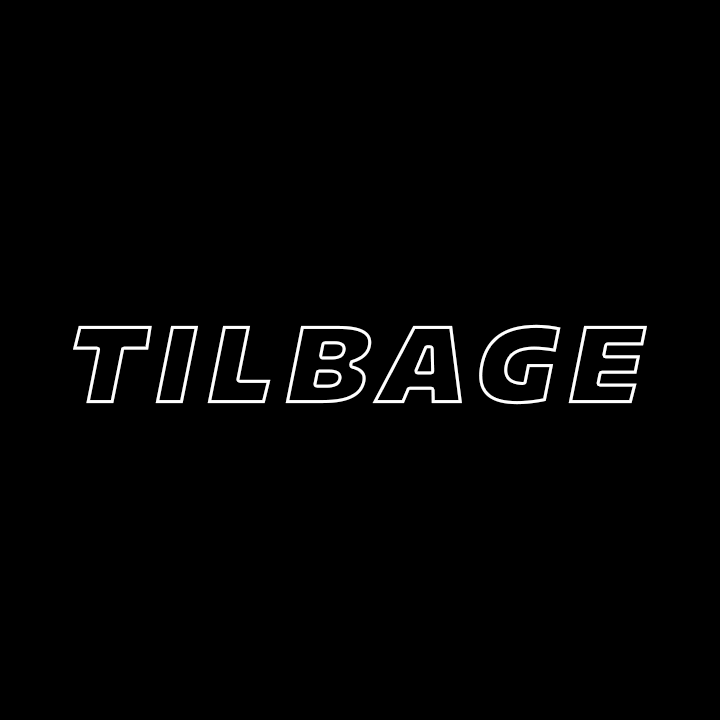
<style>
.page{position:relative;width:720px;height:720px;background:#000000}
.page>*{position:absolute;margin:0}
.t1{font:110px "Majoris-Italic";letter-spacing:0.1em;color:#000000;text-transform:uppercase}
</style>
<div class="page">
<p class="t1" style="left:73px;top:324px;width:574px;height:81px">tilbage</p>
</div>
